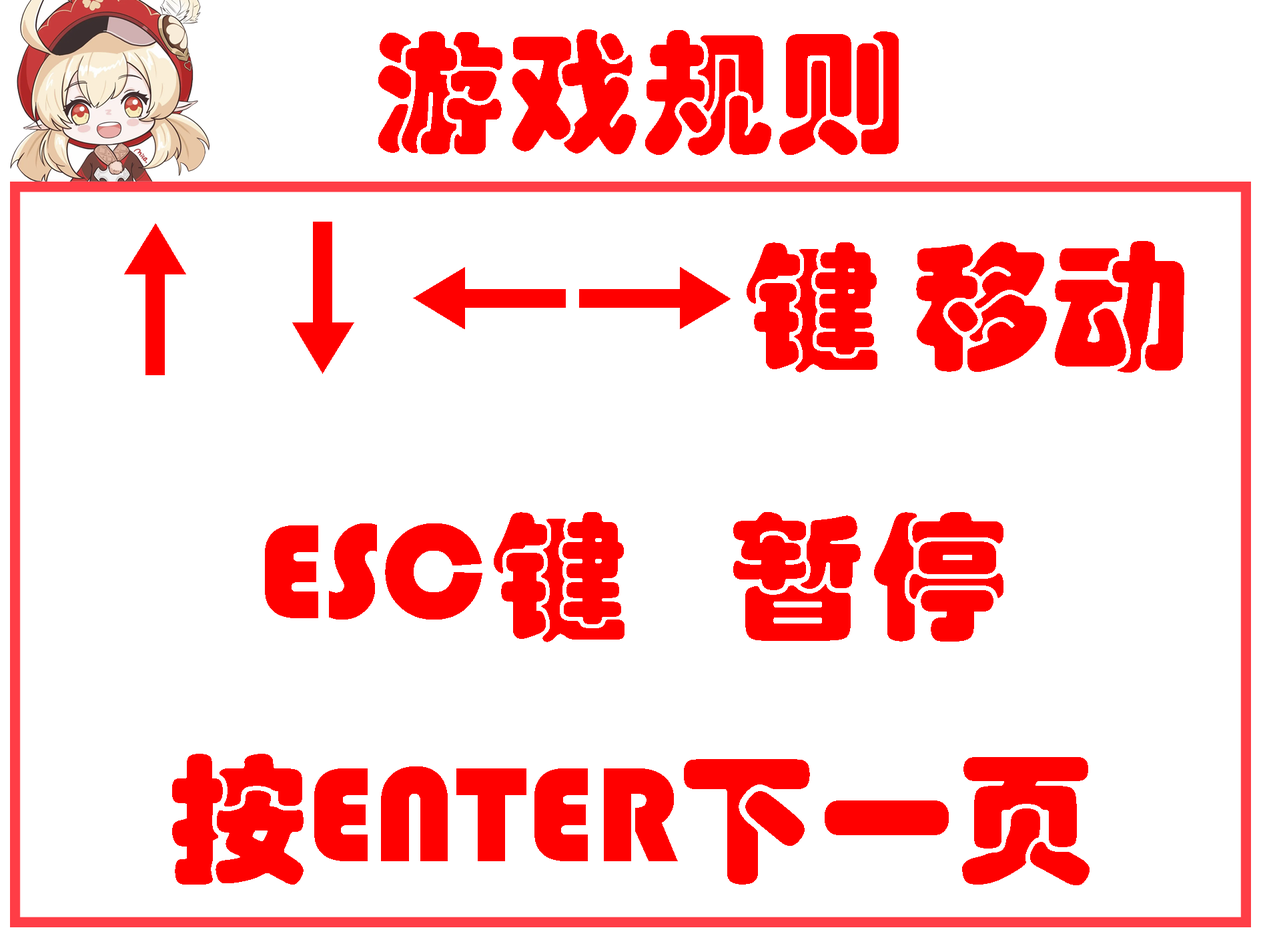
<style>
.page{position:relative;width:1261px;height:946px;background:#ffffff}
.page>*{position:absolute;margin:0}
.t1{font:133.5px "STHupo";color:#ff0000}
.t2{font:139px "STHupo";color:#ff0000}
.t3{font:166.8px "STHupo";color:#ff0000}
</style>
<div class="page">
<p class="t1" style="left:378px;top:29px;width:521px;height:126px">游戏规则</p>
<p class="t2" style="left:124px;top:222px;width:1060px;height:663px;text-align:center"><span class="t3">↑↓←→</span>键 移动<br>ESC键   暂停<br>按ENTER下一页</p>
</div>
